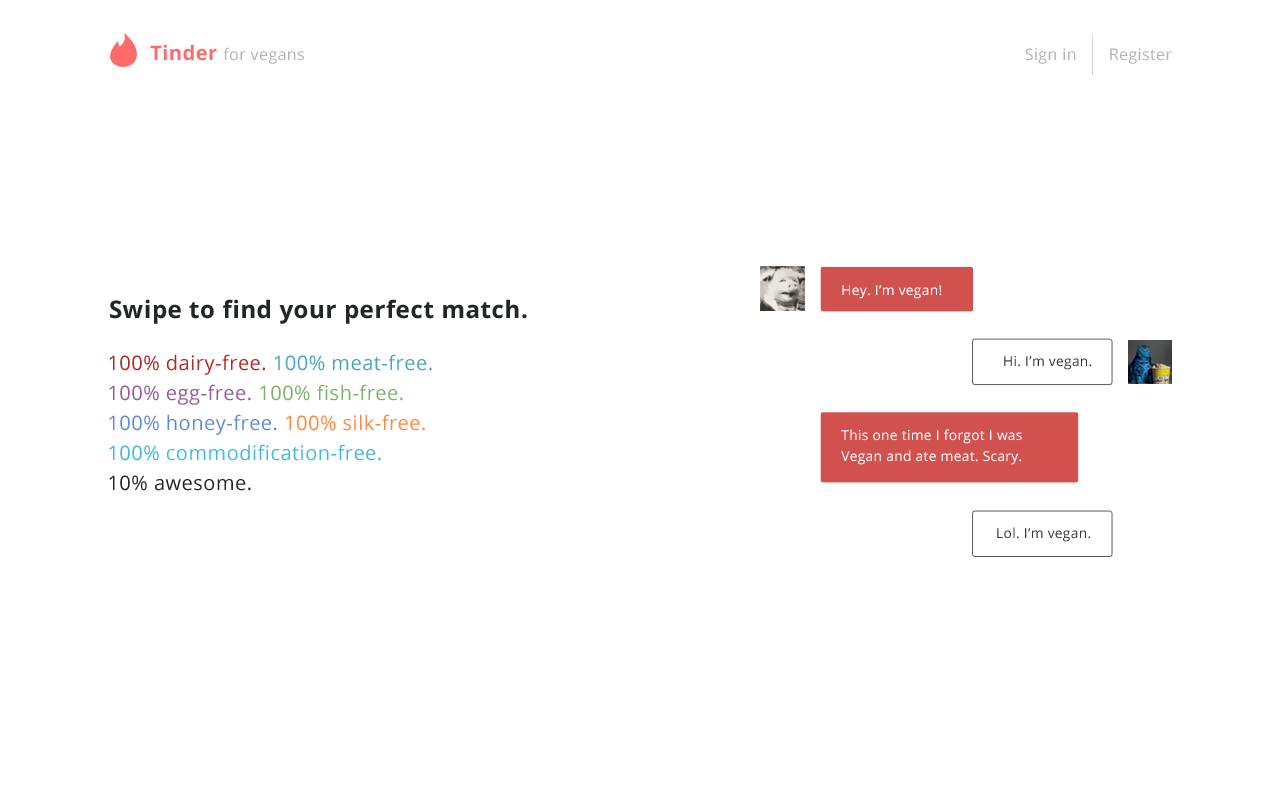
<style>
.page{position:relative;width:1280px;height:800px;background:#ffffff}
.page>*{position:absolute;margin:0}
.t1{font:16px "OpenSans";letter-spacing:0.025em;color:#b1b1b1}
.t2{font:20px "OpenSans-Bold";letter-spacing:0.025em;color:#ff6b6b}
.t3{font:13.7px "OpenSans";letter-spacing:0.025em;color:#ffffff}
.t4{font:24px "OpenSans-Bold";letter-spacing:0.025em;color:#222625}
.t5{font:20px/30px "OpenSans";letter-spacing:0.025em;color:#3eb8db}
.t6{font:20px/30px "OpenSans";letter-spacing:0.025em;color:#b22522}
.t7{font:20px/30px "OpenSans";letter-spacing:0.025em;color:#42a4c0}
.t8{font:20px/30px "OpenSans";letter-spacing:0.025em;color:#9758a0}
.t9{font:20px/30px "OpenSans";letter-spacing:0.025em;color:#7ab266}
.t10{font:20px/30px "OpenSans";letter-spacing:0.025em;color:#5b8ad8}
.t11{font:20px/30px "OpenSans";letter-spacing:0.025em;color:#fe883a}
.t12{font:20px/30px "OpenSans";letter-spacing:0.025em;color:#222526}
.t13{font:13.7px "OpenSans";letter-spacing:0.025em;color:#393631}
.t14{font:13.7px/20.5px "OpenSans";letter-spacing:0.025em;color:#ffffff}
</style>
<div class="page">
<p class="t1" style="left:150px;top:44px;width:154px;height:20px"><span class="t2">Tinder </span>for vegans</p>
<p class="t1" style="left:1025px;top:48px;width:51px;height:16px">Sign in</p>
<p class="t1" style="left:1110px;top:48px;width:62px;height:16px">Register</p>
<p class="t3" style="left:842px;top:285px;width:100px;height:14px">Hey. I’m vegan!</p>
<p class="t4" style="left:110px;top:299px;width:417px;height:25px">Swipe to find your perfect match.</p>
<p class="t5" style="left:109px;top:354px;width:323px;height:137px"><span class="t6">100% dairy-free. </span><span class="t7">100% meat-free.<br></span><span class="t8">100% egg-free. </span><span class="t9">100% fish-free.<br></span><span class="t10">100% honey-free. </span><span class="t11">100% silk-free.<br></span>100% commodification-free.<br><span class="t12">10% awesome.</span></p>
<p class="t13" style="left:1004px;top:356px;width:88px;height:14px">Hi. I’m vegan.</p>
<p class="t14" style="left:841px;top:429px;width:181px;height:36px">This one time I forgot I was<br>Vegan and ate meat. Scary.</p>
<p class="t13" style="left:997px;top:527px;width:94px;height:15px">Lol. I’m vegan.</p>
</div>
